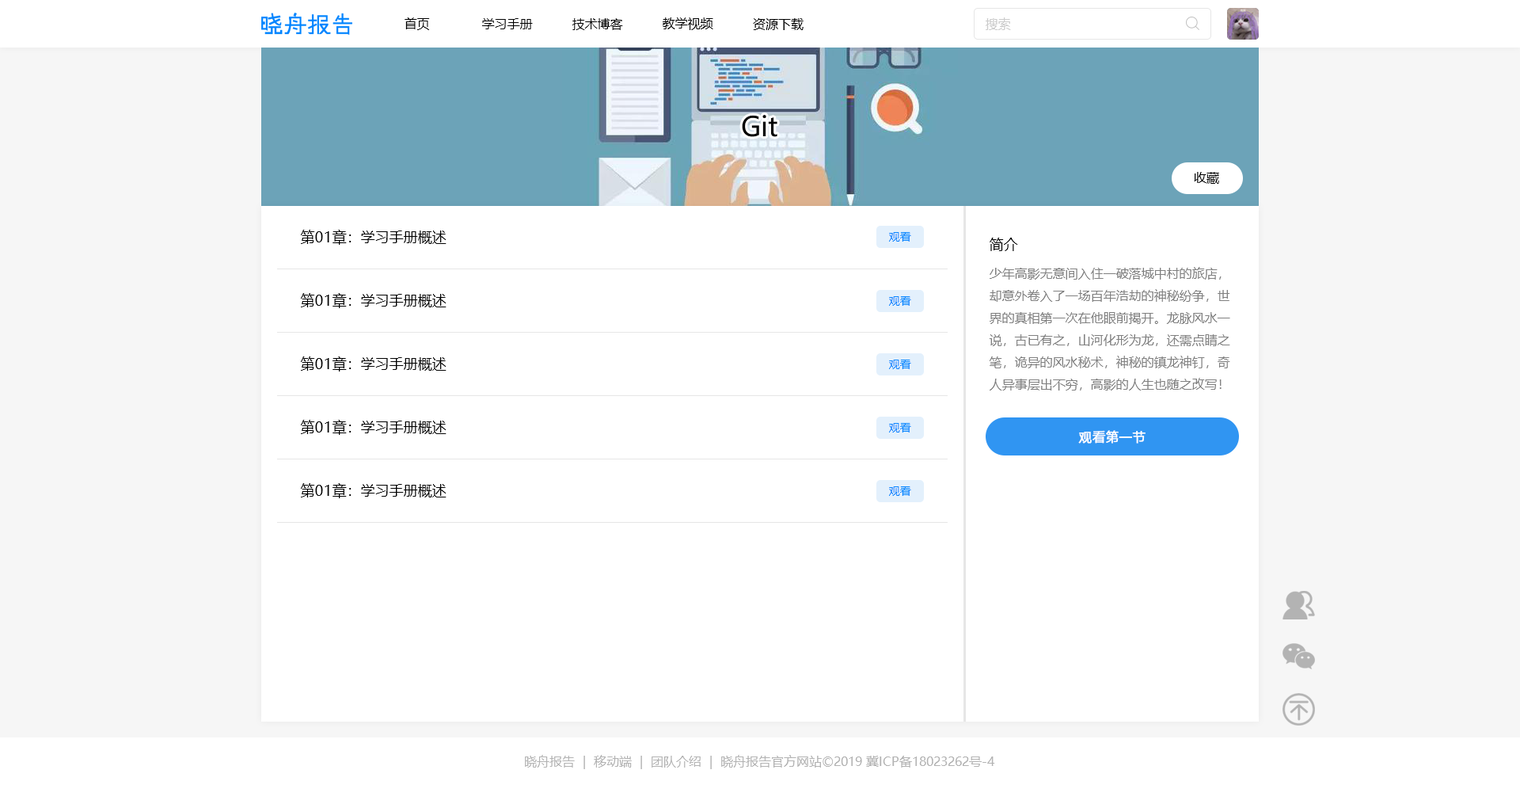
<style>
.page{position:relative;width:1520px;height:785px;background:#ffffff}
.page>*{position:absolute;margin:0}
.t1{font:12.7px "MicrosoftYaHei";color:#000000}
.t2{font:12.7px "MicrosoftYaHei";color:#cccccc}
.t3{font:26.9px "MicrosoftYaHei";color:#000000}
.t4{font:14.2px "MicrosoftYaHei";color:#000000}
.t5{font:11.1px "MicrosoftYaHei";color:#0084ff}
.t6{font:12.7px "MicrosoftYaHei";color:#808080}
.t7{font:12.7px "MicrosoftYaHei";color:#ffffff;font-weight:bold}
.t8{font:12.7px "MicrosoftYaHei";color:#b3b3b3}
</style>
<div class="page">
<p class="t1" style="left:405px;top:17px;width:25px;height:13px">首页</p>
<p class="t1" style="left:663px;top:17px;width:50px;height:13px">教学视频</p>
<p class="t2" style="left:986px;top:17px;width:25px;height:13px">搜索</p>
<p class="t1" style="left:482px;top:18px;width:51px;height:11px">学习手册</p>
<p class="t1" style="left:572px;top:18px;width:51px;height:12px">技术博客</p>
<p class="t1" style="left:753px;top:18px;width:51px;height:12px">资源下载</p>
<p class="t3" style="left:742px;top:115px;width:35px;height:22px">Git</p>
<p class="t1" style="left:1194px;top:172px;width:25px;height:12px">收藏</p>
<p class="t4" style="left:301px;top:230px;width:145px;height:15px">第01章：学习手册概述</p>
<p class="t5" style="left:889px;top:232px;width:22px;height:9px">观看</p>
<p class="t4" style="left:990px;top:237px;width:28px;height:14px">简介</p>
<p class="t6" style="left:989px;top:267px;width:241px;height:123px">少年高影无意间入住一破落城中村的旅店，<br>却意外卷入了一场百年浩劫的神秘纷争，世<br>界的真相第一次在他眼前揭开。龙脉风水一<br>说，古已有之，山河化形为龙，还需点睛之<br>笔，诡异的风水秘术，神秘的镇龙神钉，奇<br>人异事层出不穷，高影的人生也随之改写！</p>
<p class="t4" style="left:301px;top:293px;width:145px;height:15px">第01章：学习手册概述</p>
<p class="t5" style="left:889px;top:296px;width:22px;height:10px">观看</p>
<p class="t4" style="left:301px;top:356px;width:145px;height:15px">第01章：学习手册概述</p>
<p class="t5" style="left:889px;top:359px;width:22px;height:10px">观看</p>
<p class="t4" style="left:301px;top:420px;width:145px;height:15px">第01章：学习手册概述</p>
<p class="t5" style="left:889px;top:423px;width:22px;height:9px">观看</p>
<p class="t7" style="left:1078px;top:430px;width:68px;height:13px">观看第一节</p>
<p class="t4" style="left:301px;top:483px;width:145px;height:15px">第01章：学习手册概述</p>
<p class="t5" style="left:889px;top:486px;width:22px;height:10px">观看</p>
<p class="t8" style="left:525px;top:754px;width:470px;height:15px">晓舟报告  |  移动端  |  团队介绍  |  晓舟报告官方网站©2019 冀ICP备18023262号-4</p>
</div>
